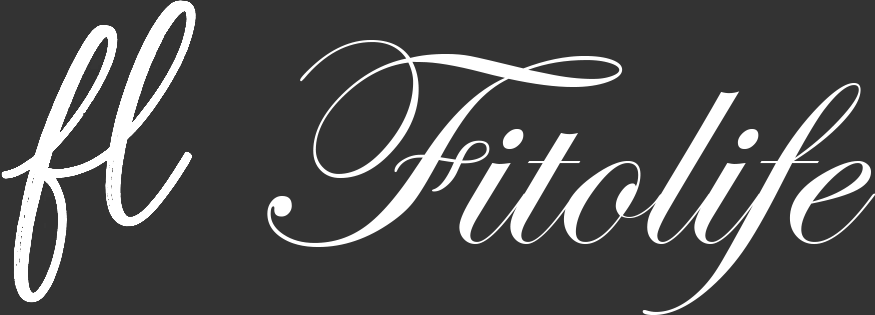
<style>
.page{position:relative;width:875px;height:315px;background:#333333}
.page>*{position:absolute;margin:0}
.t1{font:300px "EdwardianScriptITC";color:#ffffff}
</style>
<div class="page">
<p class="t1" style="left:267px;top:40px;width:608px;height:275px">Fitolife</p>
</div>
